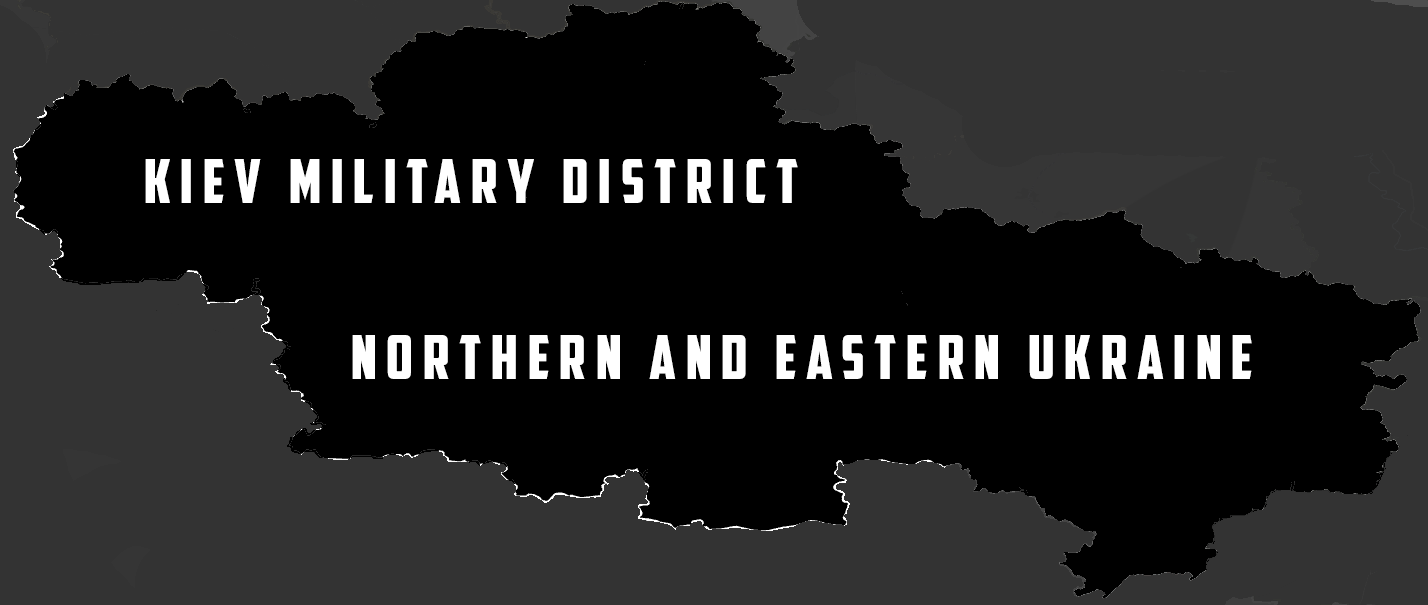
<style>
.page{position:relative;width:1428px;height:605px;background:#000000}
.page>*{position:absolute;margin:0}
.t1{font:61.3px "AmericanCaptain";letter-spacing:0.16em;color:#ffffff}
</style>
<div class="page">
<p class="t1" style="left:145px;top:159px;width:653px;height:44px">Kiev military district</p>
<p class="t1" style="left:352px;top:335px;width:900px;height:44px">northern and eastern ukraine</p>
</div>
